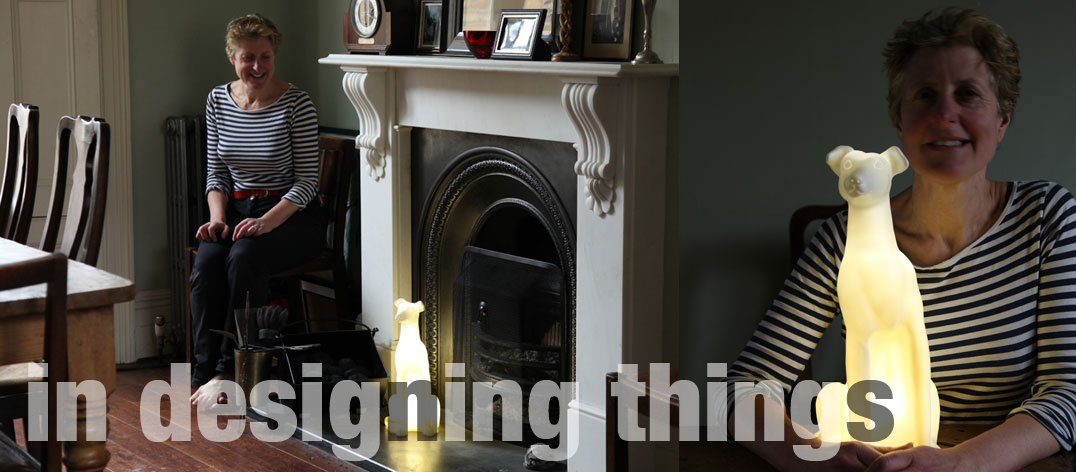
<style>
.page{position:relative;width:1076px;height:472px}
.page>*{position:absolute;margin:0}
.t1{font:109.6px "HelveticaNeue-CondensedBlack"}
</style>
<div class="page">
<p class="t1" style="left:28px;top:363px;width:866px;height:99px">in designing things</p>
</div>
